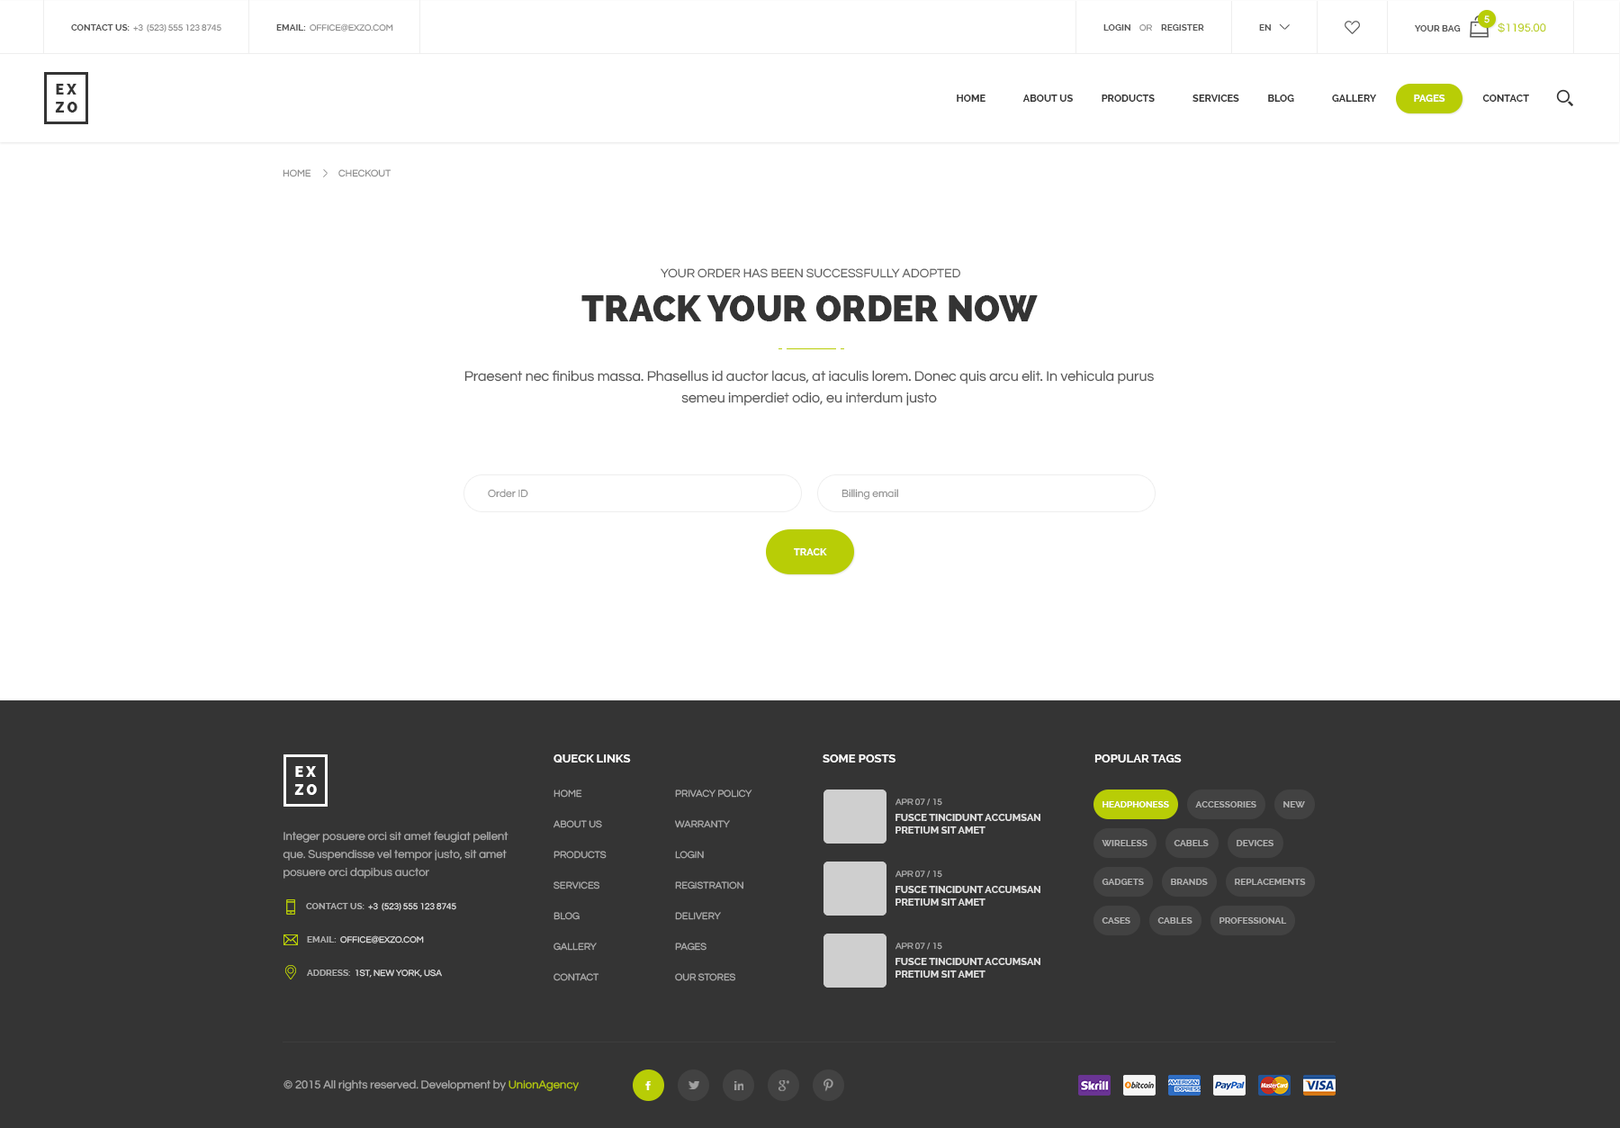
<style>
.page{position:relative;width:1620px;height:1128px;background:#ffffff}
.page>*{position:absolute;margin:0}
.t1{font:9.9px "Questrial-Regular";color:#ffffff;text-transform:uppercase}
.t2{font:9px "Raleway-Bold";color:#555555;text-transform:uppercase}
.t3{font:9px "Questrial-Regular";color:#888888;text-transform:uppercase}
.t4{font:11.7px "Questrial-Regular";color:#b8cd06;text-transform:uppercase}
.t5{font:14.4px/18px "Raleway-Heavy";letter-spacing:0.2em;color:#343434;text-transform:uppercase}
.t6{font:9.9px "Raleway-Bold";color:#343434;text-transform:uppercase}
.t7{font:9.9px "Raleway-Bold";color:#ffffff;text-transform:uppercase}
.t8{font:9.9px "Questrial-Regular";color:#888888;text-transform:uppercase}
.t9{font:12.6px "Questrial-Regular";color:#555555;text-transform:uppercase}
.t10{font:36px "Raleway-Heavy";color:#343434;text-transform:uppercase}
.t11{font:14.4px/21.6px "Questrial-Regular";color:#555555}
.t12{font:10.8px "Questrial-Regular";color:#888888}
.t13{font:11.7px "Raleway-Bold";color:#ffffff;text-transform:uppercase}
.t14{font:14.4px/18px "Raleway-Heavy";letter-spacing:0.2em;color:#ffffff;text-transform:uppercase}
.t15{font:9.9px/30.6px "Questrial-Regular";color:#aeaeae;text-transform:uppercase}
.t16{font:9px "Questrial-Regular";text-transform:uppercase}
.t17{font:9px "Raleway-Bold";color:#ffffff;text-transform:uppercase}
.t18{font:9px "Raleway-Bold";color:#b1b1b1;text-transform:uppercase}
.t19{font:9.9px/12.6px "Raleway-Bold";color:#e1e1e1;text-transform:uppercase}
.t20{font:11.7px/18px "Questrial-Regular";color:#aeaeae}
.t21{font:9px "Raleway-Bold";color:#aeaeae;text-transform:uppercase}
.t22{font:9px "Questrial-Regular";color:#e1e1e1;text-transform:uppercase}
.t23{font:11.7px "Questrial-Regular";color:#aeaeae}
.t24{font:11.7px "Questrial-Regular";color:#b8cd06}
</style>
<div class="page">
<p class="t1" style="left:1484px;top:15px;width:6px;height:8px">5</p>
<p class="t2" style="left:71px;top:24px;width:59px;height:7px">contact us:</p>
<p class="t3" style="left:133px;top:23px;width:88px;height:9px">+3  (523) 555 123 8745</p>
<p class="t2" style="left:276px;top:24px;width:30px;height:7px">email:</p>
<p class="t3" style="left:310px;top:23px;width:83px;height:9px">office@exzo.com</p>
<p class="t2" style="left:1103px;top:24px;width:27px;height:7px">login</p>
<p class="t3" style="left:1139px;top:24px;width:13px;height:8px">or</p>
<p class="t2" style="left:1161px;top:24px;width:43px;height:7px">register</p>
<p class="t2" style="left:1259px;top:24px;width:12px;height:7px">en</p>
<p class="t2" style="left:1415px;top:25px;width:46px;height:7px">Your bag</p>
<p class="t4" style="left:1498px;top:22px;width:48px;height:11px">$1195.00</p>
<p class="t5" style="left:55px;top:84px;width:22px;height:28px">ex<br>zo</p>
<p class="t6" style="left:957px;top:94px;width:572px;height:8px">Home                about us            products                services            blog                gallery                <span class="t7">pages</span>                contact</p>
<p class="t8" style="left:283px;top:169px;width:109px;height:8px">home             checkout</p>
<p class="t9" style="left:661px;top:268px;width:299px;height:10px">your order has been successfully adopted</p>
<p class="t10" style="left:581px;top:295px;width:457px;height:26px">track your order now</p>
<p class="t11" style="left:464px;top:370px;width:690px;height:36px;text-align:center">Praesent nec finibus massa. Phasellus id auctor lacus, at iaculis lorem. Donec quis arcu elit. In vehicula purus semeu imperdiet odio, eu interdum justo</p>
<p class="t12" style="left:488px;top:489px;width:40px;height:9px">Order ID</p>
<p class="t12" style="left:842px;top:489px;width:56px;height:11px">Billing email</p>
<p class="t7" style="left:794px;top:548px;width:33px;height:7px">track</p>
<p class="t13" style="left:554px;top:754px;width:77px;height:8px">queck links</p>
<p class="t13" style="left:823px;top:754px;width:73px;height:8px">some posts</p>
<p class="t13" style="left:1094px;top:754px;width:88px;height:8px">popular tags</p>
<p class="t14" style="left:294px;top:766px;width:23px;height:29px">ex<br>zo</p>
<p class="t15" style="left:554px;top:789px;width:53px;height:192px">home<br>about us<br>products<br>services<br>blog<br>gallery<br>contact</p>
<p class="t15" style="left:675px;top:789px;width:77px;height:192px">privacy policy<br>warranty<br>login<br>registration<br>delivery<br>pages<br>our stores</p>
<p class="t16" style="left:896px;top:798px;width:46px;height:8px">apr 07 / 15</p>
<p class="t17" style="left:1102px;top:801px;width:67px;height:6px">headphoness</p>
<p class="t18" style="left:1195px;top:801px;width:61px;height:6px">accessories</p>
<p class="t18" style="left:1283px;top:801px;width:22px;height:6px">new</p>
<p class="t19" style="left:896px;top:814px;width:144px;height:19px">Fusce tincidunt accumsan pretium sit amet</p>
<p class="t20" style="left:283px;top:831px;width:225px;height:47px">Integer posuere orci sit amet feugiat pellent que. Suspendisse vel tempor justo, sit amet posuere orci dapibus auctor</p>
<p class="t18" style="left:1102px;top:840px;width:46px;height:6px">wireless</p>
<p class="t18" style="left:1174px;top:840px;width:35px;height:6px">cabels</p>
<p class="t18" style="left:1237px;top:840px;width:37px;height:6px">devices</p>
<p class="t16" style="left:896px;top:870px;width:46px;height:8px">apr 07 / 15</p>
<p class="t18" style="left:1102px;top:878px;width:42px;height:7px">gadgets</p>
<p class="t18" style="left:1171px;top:878px;width:37px;height:7px">brands</p>
<p class="t18" style="left:1235px;top:878px;width:71px;height:7px">replacements</p>
<p class="t19" style="left:896px;top:886px;width:144px;height:19px">Fusce tincidunt accumsan pretium sit amet</p>
<p class="t21" style="left:306px;top:903px;width:58px;height:6px">contact us:</p>
<p class="t16" style="left:368px;top:902px;width:88px;height:9px">+3  (523) 555 123 8745</p>
<p class="t18" style="left:1102px;top:917px;width:28px;height:6px">cases</p>
<p class="t18" style="left:1157px;top:917px;width:35px;height:6px">cables</p>
<p class="t18" style="left:1220px;top:917px;width:67px;height:6px">professional</p>
<p class="t21" style="left:307px;top:936px;width:30px;height:6px">email:</p>
<p class="t16" style="left:340px;top:935px;width:84px;height:8px">office@exzo.com</p>
<p class="t16" style="left:896px;top:942px;width:46px;height:8px">apr 07 / 15</p>
<p class="t19" style="left:896px;top:958px;width:144px;height:19px">Fusce tincidunt accumsan pretium sit amet</p>
<p class="t21" style="left:307px;top:969px;width:43px;height:7px">address:</p>
<p class="t22" style="left:356px;top:969px;width:86px;height:8px">1st, new york, usa</p>
<p class="t23" style="left:284px;top:1079px;width:222px;height:12px">© 2015 All rights reserved. Development by</p>
<p class="t24" style="left:508px;top:1080px;width:71px;height:11px">UnionAgency</p>
</div>
